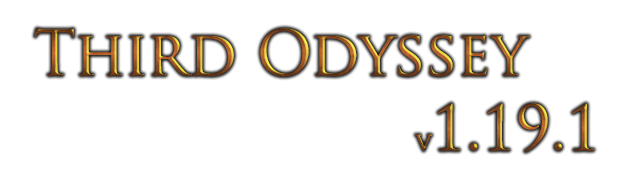
<style>
.page{position:relative;width:640px;height:180px;background:#ffffff}
.page>*{position:absolute;margin:0}
.t1{font:60.8px "TrajanPro-Regular"}
.t2{font:24px "TrajanPro-Regular"}
</style>
<div class="page">
<p class="t1" style="left:34px;top:28px;width:496px;height:49px">Third Odyssey</p>
<p class="t1" style="left:415px;top:103px;width:179px;height:49px"><span class="t2">v</span>1.19.1</p>
</div>
